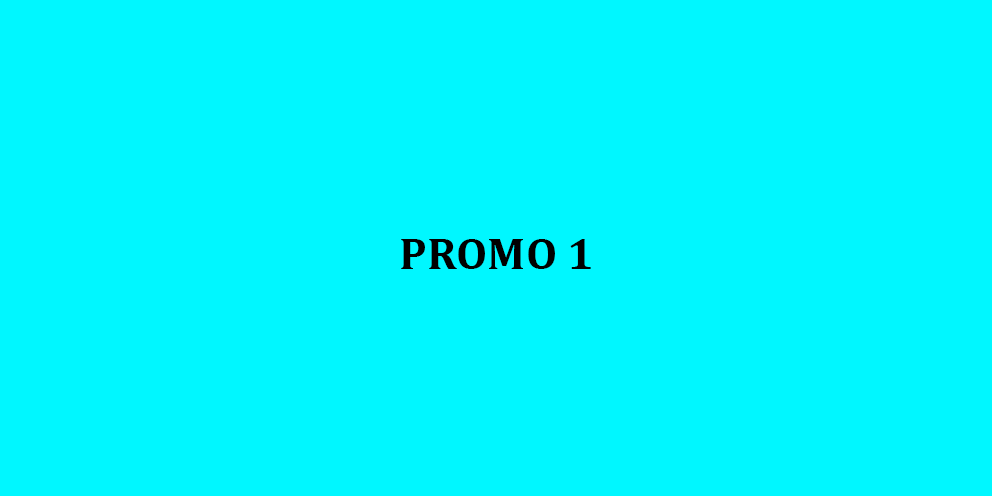
<style>
.page{position:relative;width:992px;height:496px;background:#00f7ff}
.page>*{position:absolute;margin:0}
.t1{font:45.4px "Cambria-Bold";color:#000000}
</style>
<div class="page">
<p class="t1" style="left:401px;top:239px;width:190px;height:30px">PROMO 1</p>
</div>
